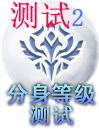
<style>
.page{position:relative;width:99px;height:129px;background:#ffffff}
.page>*{position:absolute;margin:0}
.t1{font:30px "SimSun";color:#ff004e;font-weight:bold}
.t2{font:24.4px "SimSun";color:#4c76ff;font-weight:bold}
.t3{font:22px "SimHei";font-weight:bold}
.t4{font:22px "SimSun";font-weight:bold}
</style>
<div class="page">
<p class="t1" style="left:10px;top:1px;width:73px;height:28px">测试<span class="t2">2</span></p>
<p class="t3" style="left:7px;top:83px;width:89px;height:22px">分身等级</p>
<p class="t4" style="left:29px;top:105px;width:44px;height:21px">测试</p>
</div>
